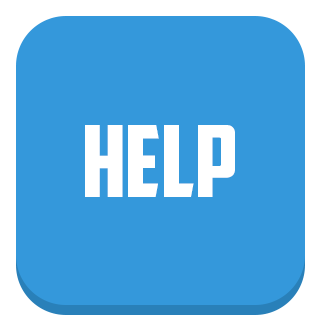
<style>
.page{position:relative;width:320px;height:320px;background:#3498db}
.page>*{position:absolute;margin:0}
.t1{font:100px "AmericanCaptain";color:#ffffff}
</style>
<div class="page">
<p class="t1" style="left:85px;top:125px;width:150px;height:72px">help</p>
</div>
